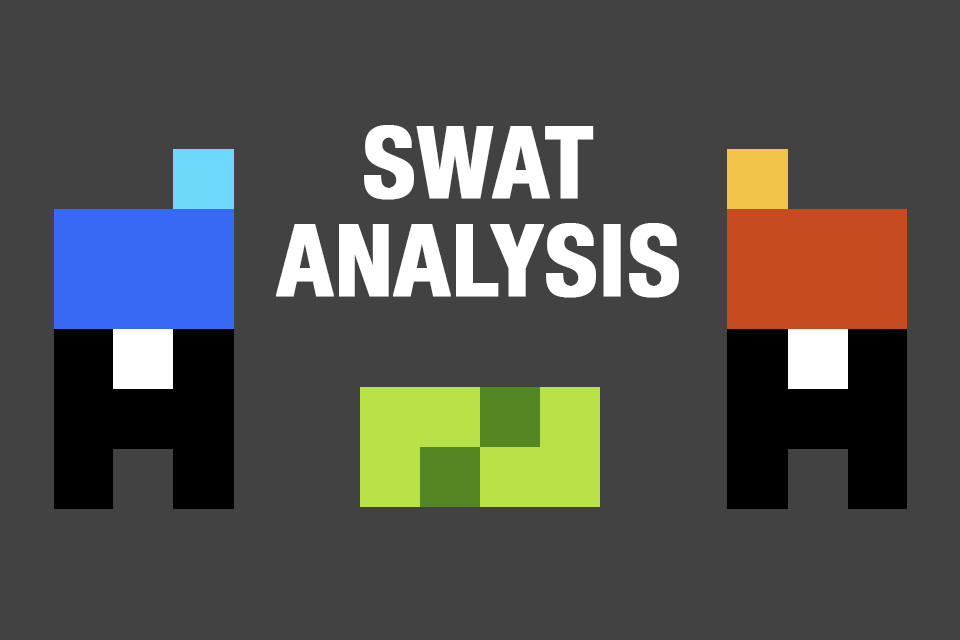
<style>
.page{position:relative;width:960px;height:640px;background:#424242}
.page>*{position:absolute;margin:0}
.t1{font:99px/98px "HelveticaNeue-CondensedBold";color:#ffffff;font-weight:bold}
</style>
<div class="page">
<p class="t1" style="left:276px;top:125px;width:403px;height:173px;text-align:center">SWAT<br>ANALYSIS</p>
</div>
